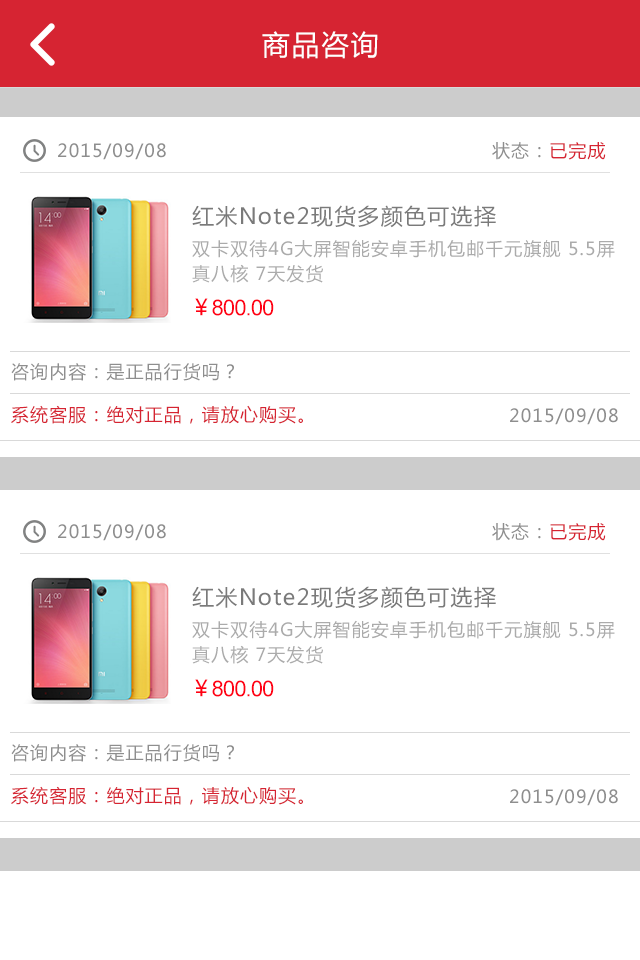
<style>
.page{position:relative;width:640px;height:960px;background:#ffffff}
.page>*{position:absolute;margin:0}
.t1{font:28px "MicrosoftYaHei";letter-spacing:0.06em;color:#ffffff}
.t2{font:18px "MicrosoftYaHei";letter-spacing:0.06em;color:#8e8e8e}
.t3{font:18px "MicrosoftYaHei";letter-spacing:0.06em;color:#d62432}
.t4{font:22px "MicrosoftYaHei";letter-spacing:0.06em;color:#7a7a7a}
.t5{font:18px/25px "MicrosoftYaHei";letter-spacing:0.06em;color:#ababab}
.t6{font:22px "ArialMT";letter-spacing:-0.04em;color:#ff0014}
.t7{font:22px "MicrosoftYaHei";letter-spacing:-0.04em;color:#ff0014}
</style>
<div class="page">
<p class="t1" style="left:262px;top:31px;width:116px;height:28px">商品咨询</p>
<p class="t2" style="left:58px;top:143px;width:108px;height:17px">2015/09/08</p>
<p class="t2" style="left:492px;top:142px;width:114px;height:18px">状态：<span class="t3">已完成</span></p>
<p class="t4" style="left:192px;top:205px;width:304px;height:23px">红米Note2现货多颜色可选择</p>
<p class="t5" style="left:192px;top:239px;width:423px;height:44px">双卡双待4G大屏智能安卓手机包邮千元旗舰 5.5屏 <br>真八核 7天发货</p>
<p class="t6" style="left:195px;top:298px;width:79px;height:18px"><span class="t7">￥</span>800.00</p>
<p class="t2" style="left:11px;top:363px;width:223px;height:18px">咨询内容：是正品行货吗？</p>
<p class="t3" style="left:11px;top:405px;width:292px;height:19px">系统客服：绝对正品，请放心购买。</p>
<p class="t2" style="left:510px;top:408px;width:108px;height:17px">2015/09/08</p>
<p class="t2" style="left:58px;top:524px;width:108px;height:17px">2015/09/08</p>
<p class="t2" style="left:492px;top:523px;width:114px;height:18px">状态：<span class="t3">已完成</span></p>
<p class="t4" style="left:192px;top:586px;width:304px;height:23px">红米Note2现货多颜色可选择</p>
<p class="t5" style="left:192px;top:620px;width:423px;height:44px">双卡双待4G大屏智能安卓手机包邮千元旗舰 5.5屏 <br>真八核 7天发货</p>
<p class="t6" style="left:195px;top:679px;width:79px;height:18px"><span class="t7">￥</span>800.00</p>
<p class="t2" style="left:11px;top:744px;width:223px;height:18px">咨询内容：是正品行货吗？</p>
<p class="t3" style="left:11px;top:786px;width:292px;height:19px">系统客服：绝对正品，请放心购买。</p>
<p class="t2" style="left:510px;top:789px;width:108px;height:17px">2015/09/08</p>
</div>
